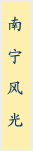
<style>
.page{position:relative;width:33px;height:151px;background:#fdefae}
.page>*{position:absolute;margin:0}
.t1{font:16px/32px "KaiTi_GB2312";letter-spacing:0.1em;color:#0c3c6c}
</style>
<div class="page">
<p class="t1" style="left:7px;top:16px;width:16px;height:111px">南<br>宁<br>风<br>光</p>
</div>
